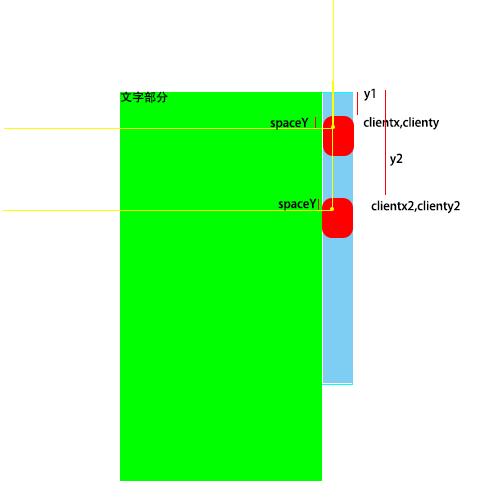
<style>
.page{position:relative;width:500px;height:500px;background:#ffffff}
.page>*{position:absolute;margin:0}
.t1{font:12px "AdobeHeitiStd-Regular";color:#000000}
</style>
<div class="page">
<p class="t1" style="left:364px;top:88px;width:11px;height:13px">y1</p>
<p class="t1" style="left:120px;top:91px;width:48px;height:12px">文字部分</p>
<p class="t1" style="left:270px;top:117px;width:39px;height:13px">spaceY</p>
<p class="t1" style="left:363px;top:117px;width:77px;height:13px">clientx,clienty</p>
<p class="t1" style="left:390px;top:153px;width:13px;height:13px">y2</p>
<p class="t1" style="left:278px;top:198px;width:39px;height:13px">spaceY</p>
<p class="t1" style="left:371px;top:200px;width:89px;height:14px">clientx2,clienty2</p>
</div>
